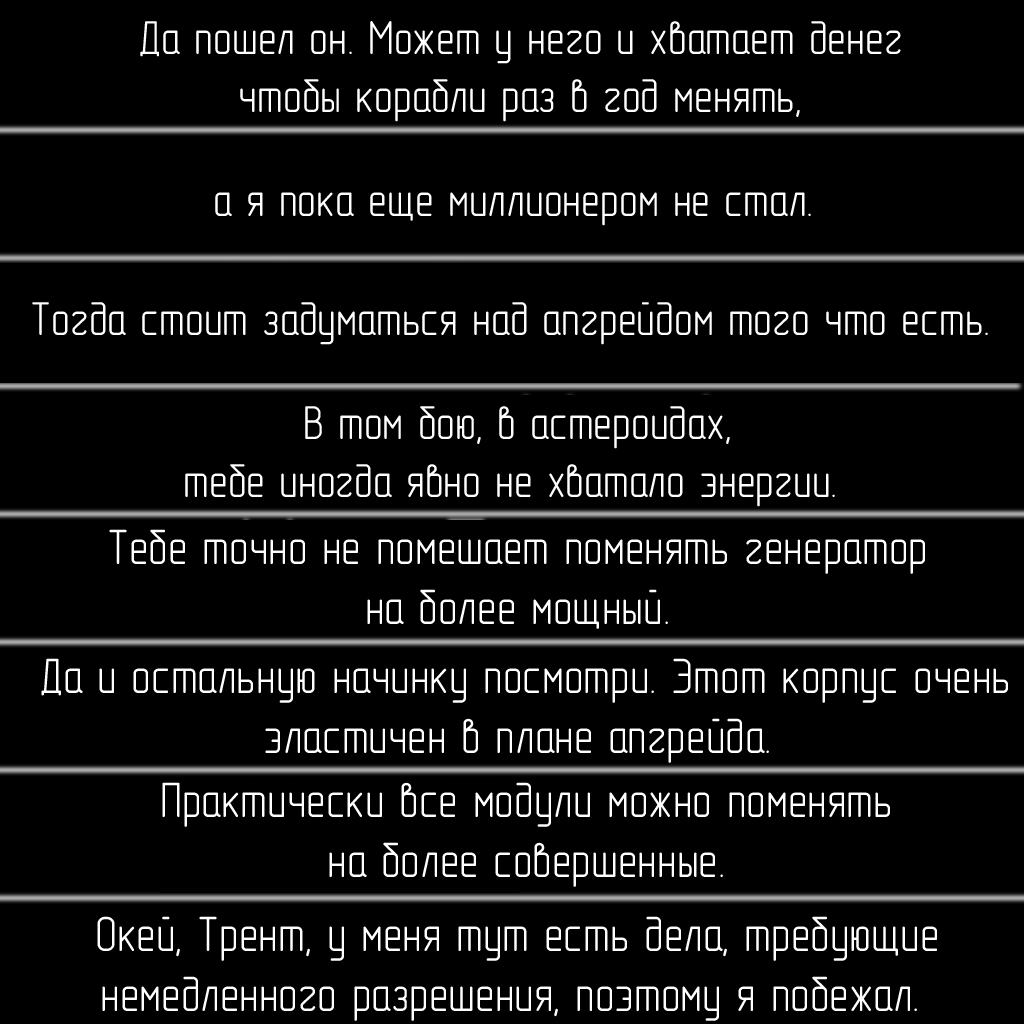
<style>
.page{position:relative;width:1024px;height:1024px;background:#000000}
.page>*{position:absolute;margin:0}
.t1{font:48px "GOST-2.304-81typeA";color:#ffffff}
.t2{font:50px "GOST-2.304-81typeA";color:#ffffff}
</style>
<div class="page">
<p class="t1" style="left:140px;top:21px;width:761px;height:101px;text-align:center">Да пошел он. Может у него и хватает денег<br>чтобы корабли раз в год менять,</p>
<p class="t1" style="left:215px;top:192px;width:596px;height:34px">а я пока еще миллионером не стал.</p>
<p class="t1" style="left:32px;top:302px;width:956px;height:43px">Тогда стоит задуматься над апгрейдом того что есть.</p>
<p class="t1" style="left:185px;top:406px;width:650px;height:101px;text-align:center">В том бою, в астероидах,<br>тебе иногда явно не хватало энергии.</p>
<p class="t2" style="left:109px;top:529px;width:816px;height:100px;text-align:center">Тебе точно не помешает поменять генератор<br>на более мощный.</p>
<p class="t2" style="left:41px;top:658px;width:967px;height:105px;text-align:center">Да и остальную начинку посмотри. Этот корпус очень<br>эластичен в плане апгрейда.</p>
<p class="t2" style="left:162px;top:782px;width:728px;height:105px;text-align:center">Практически все модули можно поменять<br>на более совершенные.</p>
<p class="t2" style="left:97px;top:916px;width:840px;height:105px;text-align:center">Окей, Трент, у меня тут есть дела, требующие<br>немедленного разрешения, поэтому я побежал.</p>
</div>
